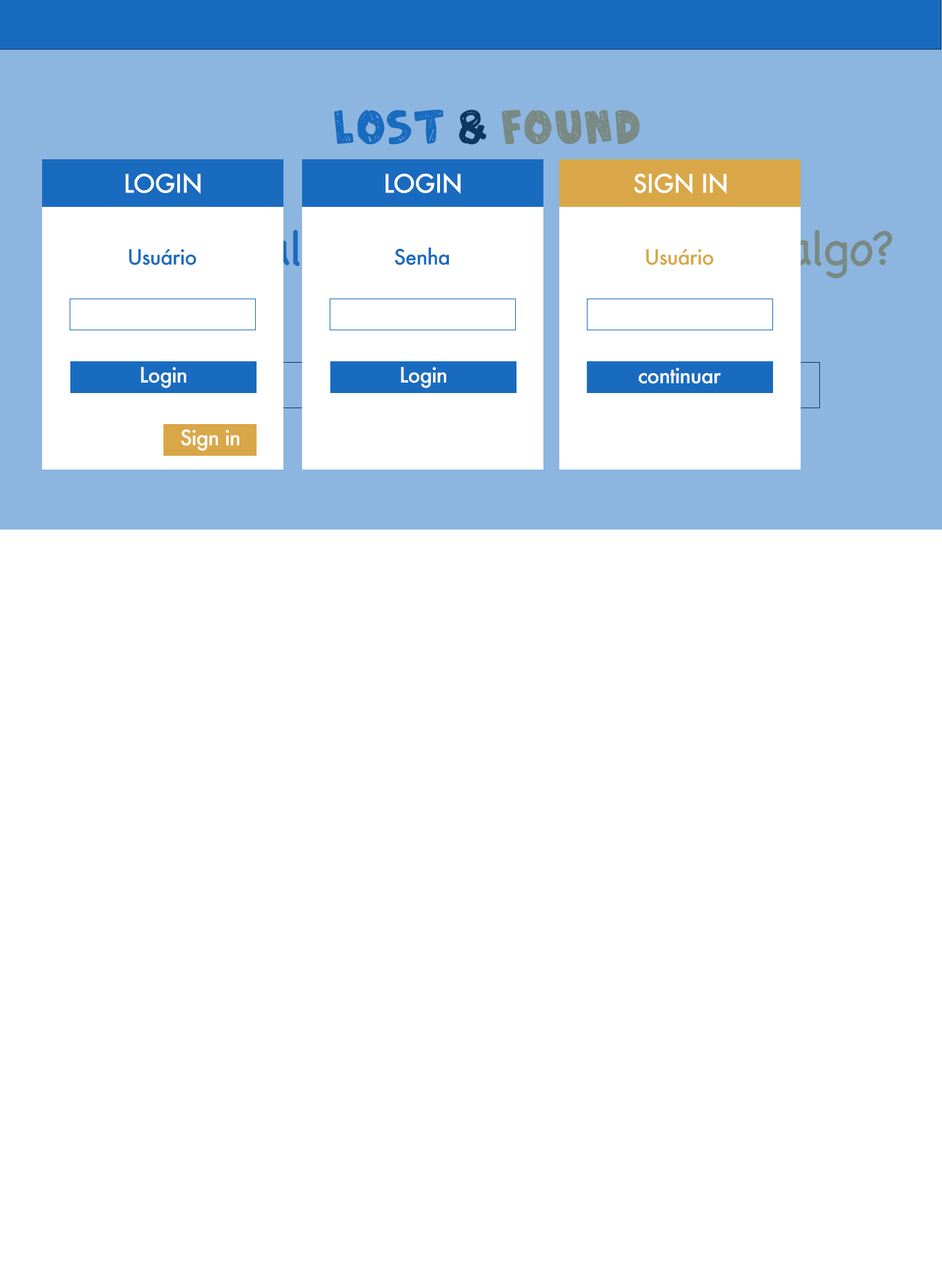
<style>
.page{position:relative;width:942px;height:1266px;background:#ffffff}
.page>*{position:absolute;margin:0}
.t1{font:49.6px "DENNE|Sketchy";letter-spacing:-0.025em;text-transform:uppercase}
.t2{font:24.8px "Futura-Medium";letter-spacing:-0.025em;color:#ffffff;text-transform:uppercase}
.t3{font:20.7px "Futura-Medium";letter-spacing:-0.025em;color:#196bbf}
.t4{font:20.7px "Futura-Medium";letter-spacing:-0.025em;color:#d9a747}
.t5{font:20.7px "Futura-Medium";letter-spacing:-0.025em;color:#ffffff}
</style>
<div class="page">
<p class="t1" style="left:334px;top:110px;width:306px;height:35px">Lost &amp; Found</p>
<p class="t2" style="left:125px;top:172px;width:76px;height:22px">Login</p>
<p class="t2" style="left:385px;top:172px;width:76px;height:22px">Login</p>
<p class="t2" style="left:634px;top:172px;width:93px;height:22px">SIGN IN</p>
<p class="t3" style="left:129px;top:249px;width:68px;height:16px">Usuário</p>
<p class="t3" style="left:394px;top:248px;width:55px;height:17px">Senha</p>
<p class="t4" style="left:646px;top:249px;width:68px;height:16px">Usuário</p>
<p class="t5" style="left:639px;top:368px;width:82px;height:16px">continuar</p>
</div>
